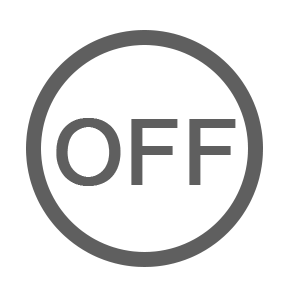
<style>
.page{position:relative;width:300px;height:300px;background:#ffffff}
.page>*{position:absolute;margin:0}
.t1{font:90px "ArialMT";color:#5f5f5f;font-weight:bold}
</style>
<div class="page">
<p class="t1" style="left:56px;top:118px;width:180px;height:68px">OFF</p>
</div>
